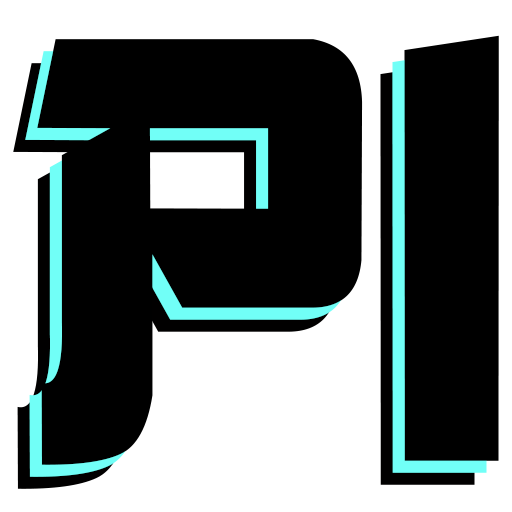
<style>
.page{position:relative;width:512px;height:512px;background:#000000}
.page>*{position:absolute;margin:0}
.t1{font:637px "GangofThree";color:#000000}
.t2{font:637px "GangofThree";color:#010000}
</style>
<div class="page">
<p class="t1" style="left:37px;top:35px;width:462px;height:430px">Pi</p>
<p class="t1" style="left:25px;top:47px;width:462px;height:430px">Pi</p>
<p class="t2" style="left:13px;top:59px;width:462px;height:430px">Pi</p>
</div>
